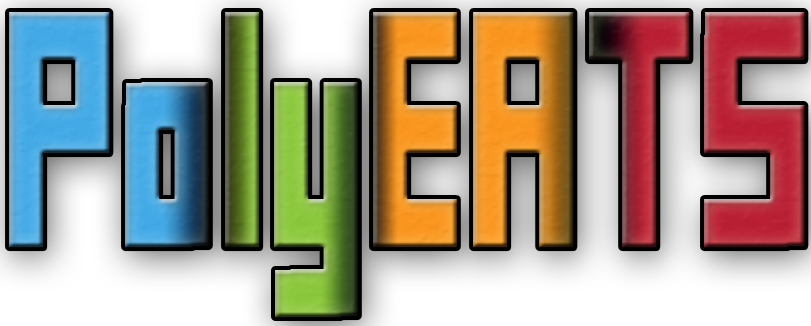
<style>
.page{position:relative;width:811px;height:326px}
.page>*{position:absolute;margin:0}
.t1{font:186.8px "FFFForward";scale:0.71 1}
</style>
<div class="page">
<p class="t1" style="left:9px;top:12px;width:796px;height:305px">PolyEATS</p>
</div>
